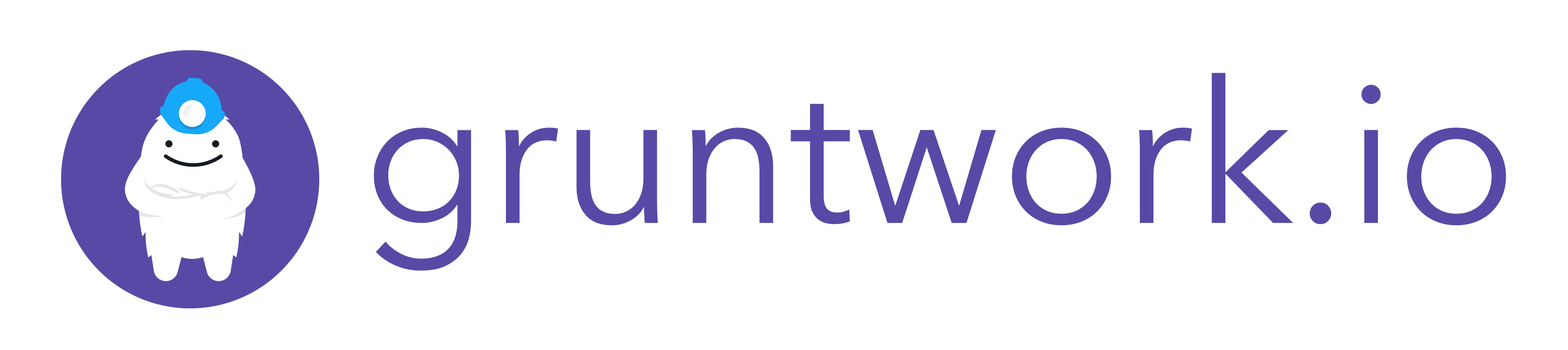
<style>
.page{position:relative;width:1568px;height:350px;background:#ffffff}
.page>*{position:absolute;margin:0}
.t1{font:198.4px "AvenirNext-Regular";color:#5849a6}
</style>
<div class="page">
<p class="t1" style="left:374px;top:73px;width:1132px;height:198px">gruntwork.io</p>
</div>
